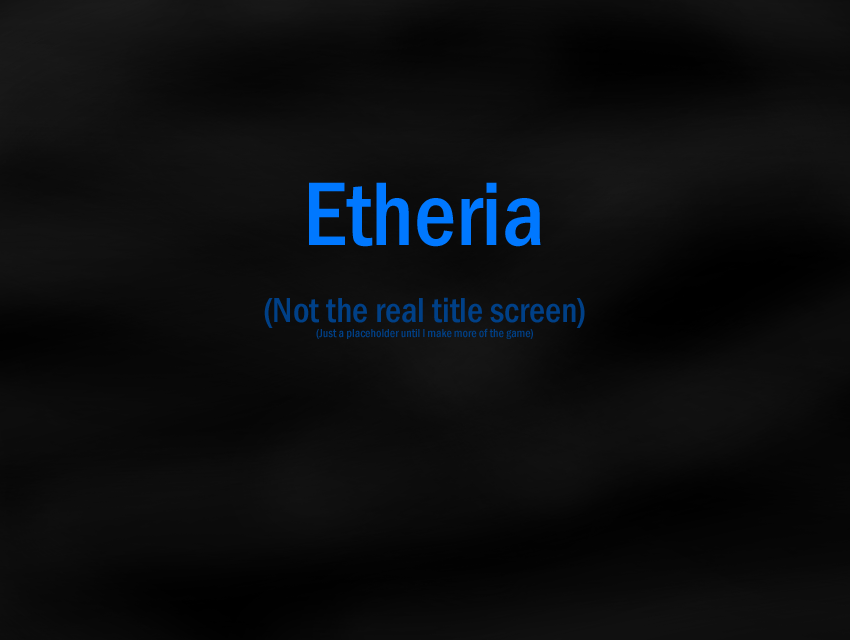
<style>
.page{position:relative;width:850px;height:640px}
.page>*{position:absolute;margin:0}
.t1{font:93.6px "FranklinGothic-MediumCond";color:#0078ff}
.t2{font:12px "FranklinGothic-MediumCond";color:#004087}
.t3{font:36px "FranklinGothic-MediumCond";color:#004087}
</style>
<div class="page">
<p class="t1" style="left:309px;top:182px;width:232px;height:65px">Etheria</p>
<p class="t2" style="left:264px;top:297px;width:321px;height:42px;text-align:center"><span class="t3">(Not the real title screen)<br></span>(Just a placeholder until I make more of the game)</p>
</div>
